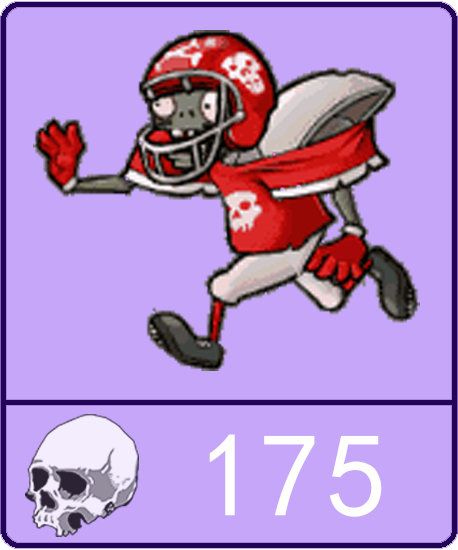
<style>
.page{position:relative;width:458px;height:550px;background:#c6a6f9}
.page>*{position:absolute;margin:0}
.t1{font:120px "SimHei";color:#fefefc}
.t2{font:120px "SimHei";letter-spacing:0.075em;color:#fefefc}
</style>
<div class="page">
<p class="t1" style="left:209px;top:434px;width:173px;height:83px">1<span class="t2">7</span>5</p>
</div>
